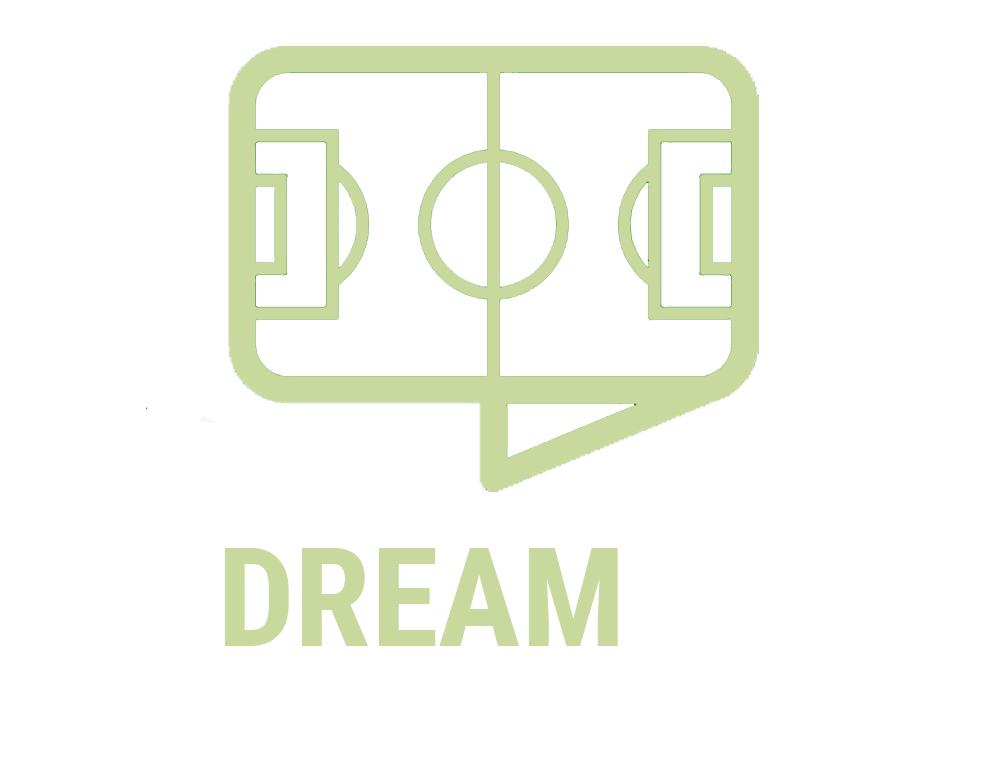
<style>
.page{position:relative;width:1000px;height:780px;background:#ffffff}
.page>*{position:absolute;margin:0}
.t1{font:137.6px "RobotoCondensed-Bold";color:#c9d99e}
.t2{font:137.6px "RobotoCondensed-Bold";color:#ffffff}
</style>
<div class="page">
<p class="t1" style="left:46px;top:548px;width:899px;height:98px"><span class="t2">MY</span>DREAM<span class="t2">TEAM</span></p>
</div>
